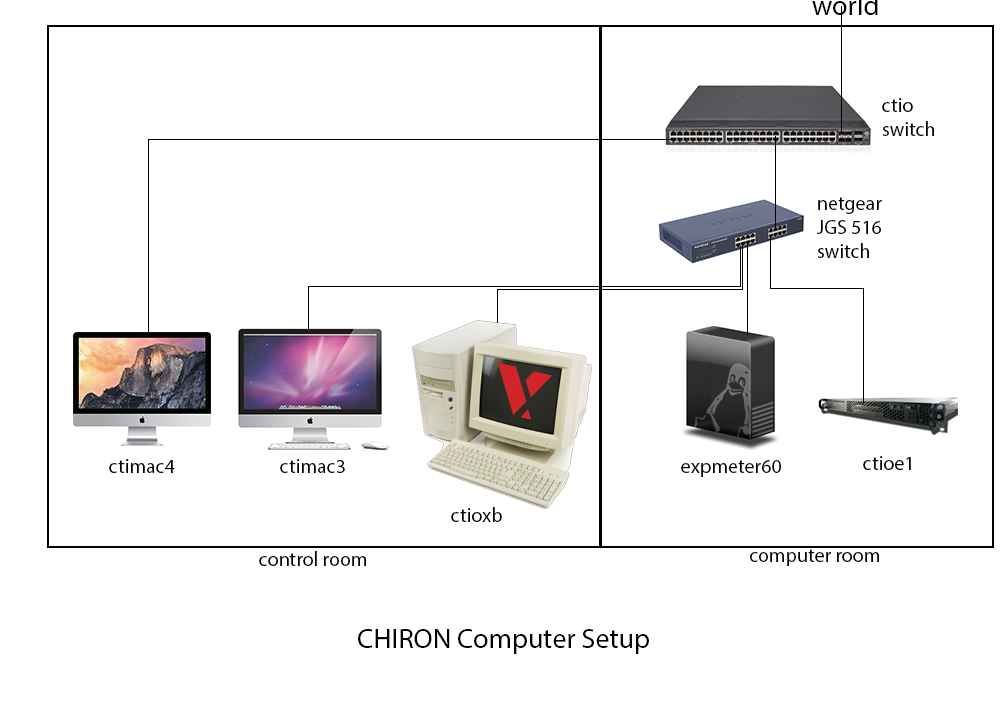
<style>
.page{position:relative;width:1008px;height:720px;background:#ffffff}
.page>*{position:absolute;margin:0}
.t1{font:20px "MyriadPro-Regular";color:#000000}
.t2{font:28px "MyriadPro-Regular";color:#000000}
</style>
<div class="page">
<p class="t1" style="left:882px;top:98px;width:52px;height:38px">ctio<br>switch</p>
<p class="t1" style="left:816px;top:197px;width:66px;height:61px">netgear<br>JGS 516<br>switch</p>
<p class="t1" style="left:109px;top:459px;width:66px;height:14px">ctimac4</p>
<p class="t1" style="left:280px;top:459px;width:65px;height:14px">ctimac3</p>
<p class="t1" style="left:681px;top:460px;width:100px;height:17px">expmeter60</p>
<p class="t1" style="left:863px;top:456px;width:48px;height:14px">ctioe1</p>
<p class="t1" style="left:451px;top:507px;width:51px;height:15px">ctioxb</p>
<p class="t1" style="left:259px;top:551px;width:107px;height:15px">control room</p>
<p class="t1" style="left:750px;top:549px;width:129px;height:17px">computer room</p>
<p class="t2" style="left:358px;top:629px;width:291px;height:25px">CHIRON Computer Setup</p>
</div>
